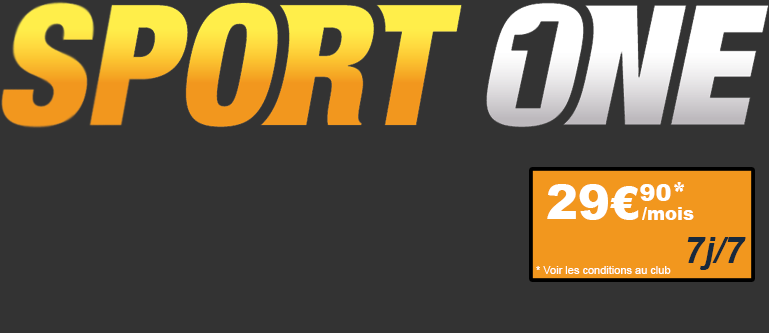
<style>
.page{position:relative;width:769px;height:333px;background:#333333}
.page>*{position:absolute;margin:0}
.t1{font:48px "Arial-Black";color:#ffffff}
.t2{font:44px "Arial-Black";color:#ffffff}
.t3{font:24px "Arial-Black";color:#ffffff}
.t4{font:18px "Rockwell-ExtraBold";color:#ffffff}
.t5{font:18px "Arial-Black";color:#ffffff}
.t6{font:35.7px "Arial-BoldItalicMT";color:#18293c}
.t7{font:11px "ArialMT";color:#ffffff}
</style>
<div class="page">
<p class="t1" style="left:547px;top:184px;width:124px;height:36px">29<span class="t2">€</span><span class="t3">90</span></p>
<p class="t4" style="left:674px;top:182px;width:11px;height:10px">*</p>
<p class="t5" style="left:642px;top:207px;width:52px;height:13px">/mois</p>
<p class="t6" style="left:687px;top:237px;width:59px;height:33px">7j/7</p>
<p class="t7" style="left:536px;top:266px;width:135px;height:8px">* Voir les conditions au club</p>
</div>
